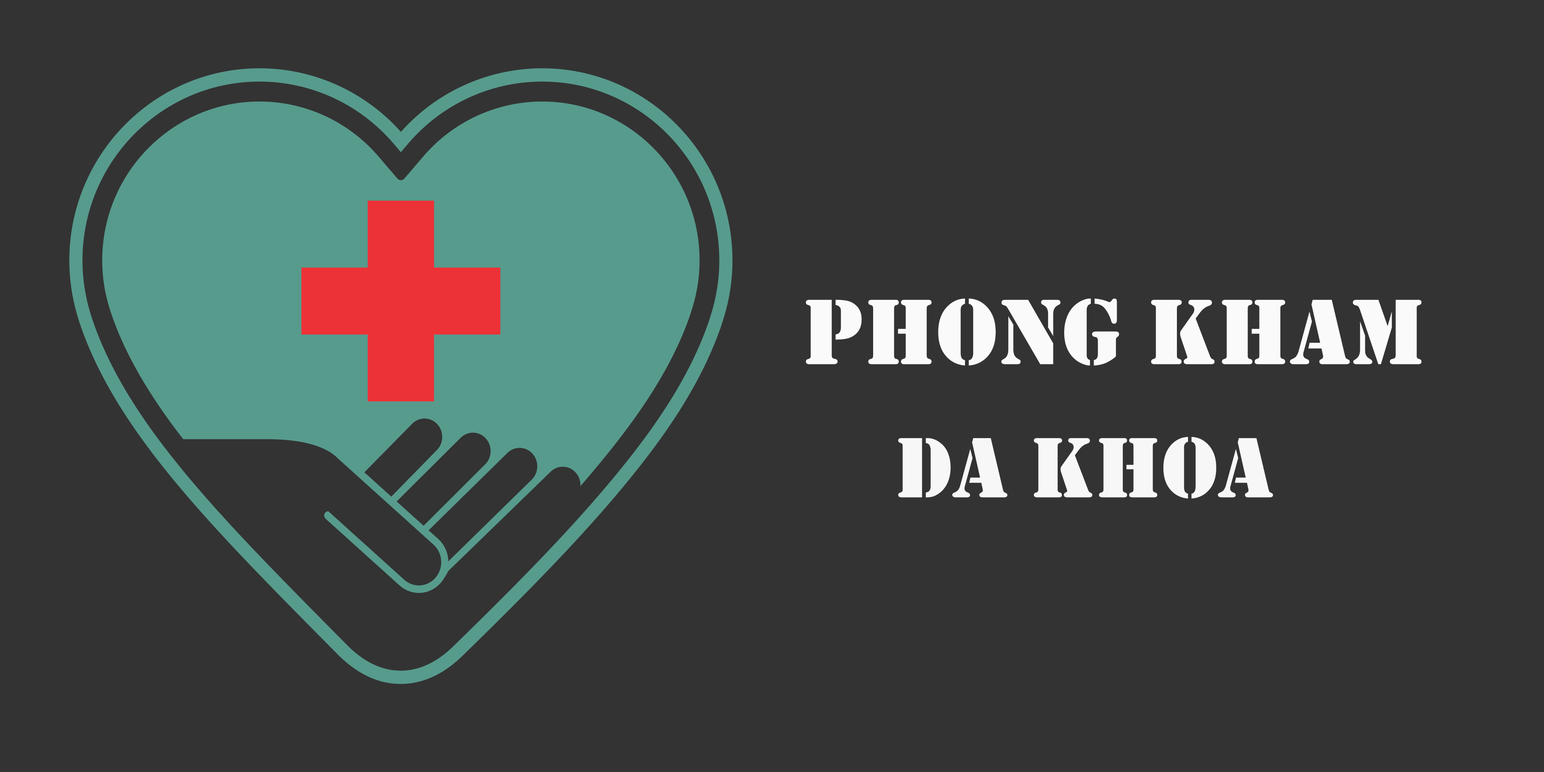
<style>
.page{position:relative;width:1544px;height:772px;background:#333333}
.page>*{position:absolute;margin:0}
.t1{font:96.5px "Stencil";color:#fafafa}
.t2{font:88.8px "Stencil";color:#f7f7f7}
</style>
<div class="page">
<p class="t1" style="left:806px;top:298px;width:616px;height:68px">PHONG KHAM</p>
<p class="t2" style="left:898px;top:437px;width:375px;height:62px">DA KHOA</p>
</div>
